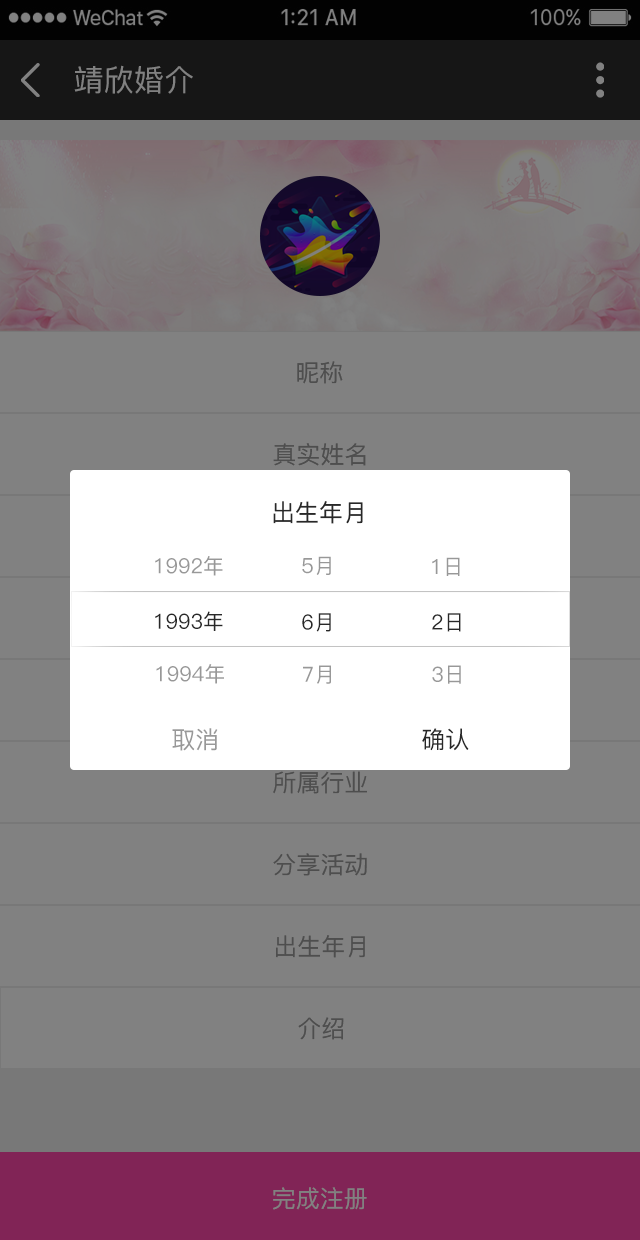
<style>
.page{position:relative;width:640px;height:1240px;background:#818181}
.page>*{position:absolute;margin:0}
.t1{font:30px "PingFang-SC-Medium";letter-spacing:0.01em;color:#818181;text-transform:uppercase}
.t2{font:24px "PingFang-SC-Medium";color:#4e4e4e;text-transform:uppercase}
.t3{font:24px "PingFang-SC-Medium";color:#282828;text-transform:uppercase}
.t4{font:20.8px "PingFang-SC-Medium";color:#989898}
.t5{font:20.8px "PingFang-SC-Medium";color:#282828}
.t6{font:24px "PingFang-SC-Medium";color:#989898;text-transform:uppercase}
.t7{font:24px "PingFang-SC-Medium";color:#818181;text-transform:uppercase}
</style>
<div class="page">
<p class="t1" style="left:74px;top:65px;width:119px;height:29px">靖欣婚介</p>
<p class="t2" style="left:297px;top:361px;width:46px;height:23px">昵称</p>
<p class="t2" style="left:273px;top:443px;width:93px;height:23px">真实姓名</p>
<p class="t3" style="left:273px;top:501px;width:90px;height:23px">出生年月</p>
<p class="t4" style="left:155px;top:556px;width:68px;height:20px">1992年</p>
<p class="t4" style="left:302px;top:556px;width:29px;height:19px">5月</p>
<p class="t4" style="left:432px;top:557px;width:28px;height:19px">1日</p>
<p class="t5" style="left:155px;top:611px;width:68px;height:20px">1993年</p>
<p class="t5" style="left:302px;top:613px;width:29px;height:19px">6月</p>
<p class="t5" style="left:432px;top:613px;width:29px;height:19px">2日</p>
<p class="t4" style="left:156px;top:664px;width:68px;height:20px">1994年</p>
<p class="t4" style="left:303px;top:665px;width:28px;height:19px">7月</p>
<p class="t4" style="left:432px;top:665px;width:29px;height:19px">3日</p>
<p class="t6" style="left:172px;top:728px;width:46px;height:23px">取消</p>
<p class="t3" style="left:422px;top:728px;width:47px;height:23px">确认</p>
<p class="t2" style="left:273px;top:771px;width:94px;height:23px">所属行业</p>
<p class="t2" style="left:273px;top:853px;width:94px;height:23px">分享活动</p>
<p class="t2" style="left:276px;top:935px;width:89px;height:23px">出生年月</p>
<p class="t2" style="left:298px;top:1017px;width:46px;height:23px">介绍</p>
<p class="t7" style="left:273px;top:1187px;width:94px;height:23px">完成注册</p>
</div>
